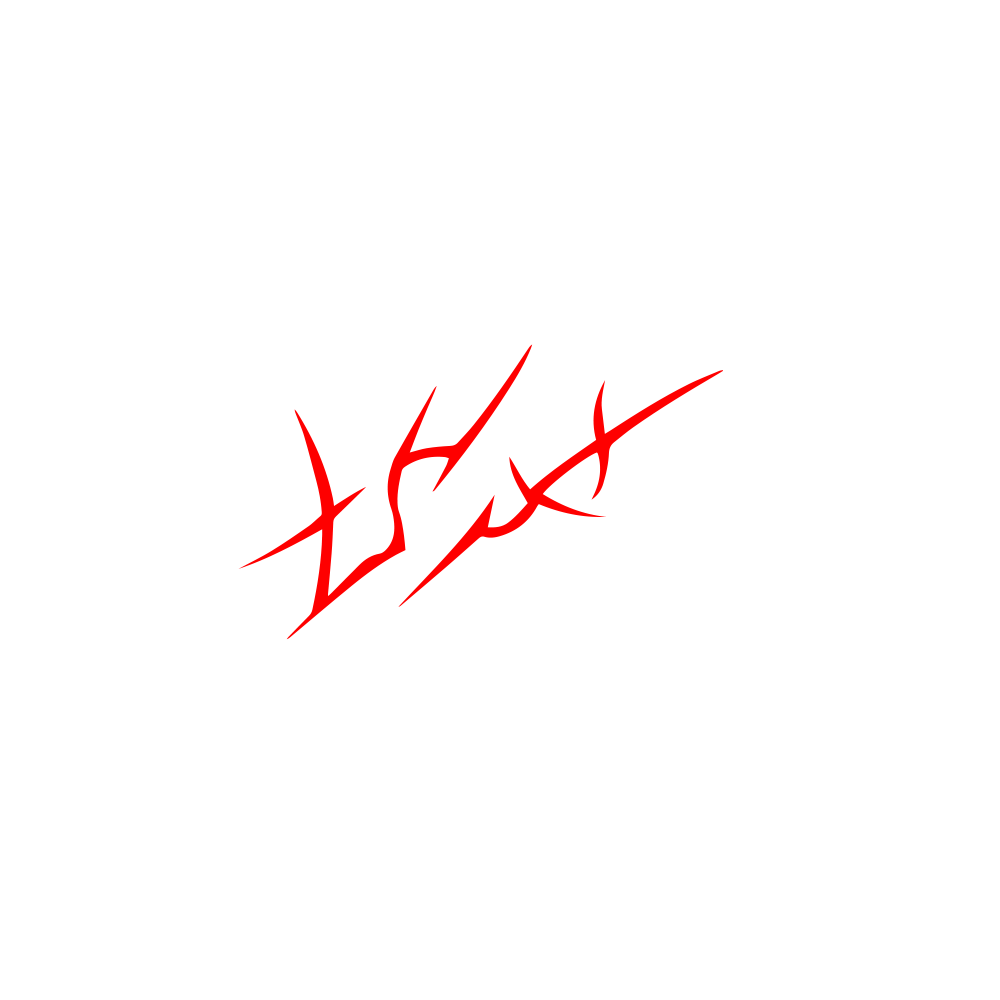
<style>
.page{position:relative;width:1000px;height:1000px;background:#ffffff}
.page>*{position:absolute;margin:0}
.t1{font:388.1px "BONESXBONESRegular";letter-spacing:-0.1em;color:#fe0000}
.t2{font:415.8px "BONESXBONESRegular";letter-spacing:-0.1em;color:#fe0000}
</style>
<div class="page">
<p class="t1" style="left:238px;top:344px;width:295px;height:296px">S</p>
<p class="t2" style="left:398px;top:370px;width:326px;height:237px">F</p>
</div>
